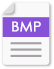
<style>
.page{position:relative;width:54px;height:69px;background:#f9f9f9}
.page>*{position:absolute;margin:0}
.t1{font:13.5px "STHeitiTC-Light";color:#ffffff;text-transform:uppercase;font-weight:bold;scale:1.04 1}
</style>
<div class="page">
<p class="t1" style="left:12px;top:21px;width:29px;height:11px">bmp</p>
</div>
